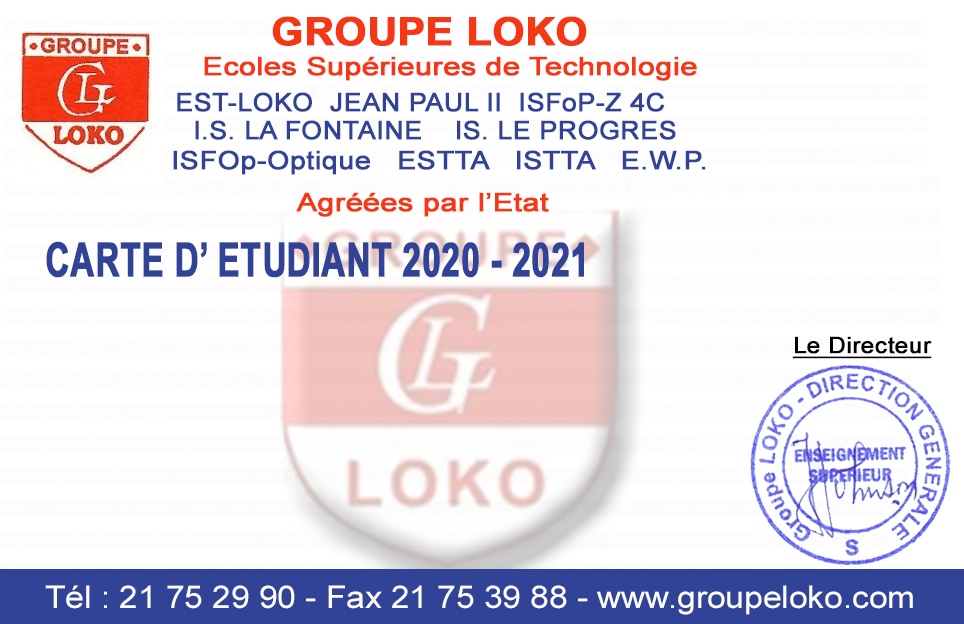
<style>
.page{position:relative;width:964px;height:624px;background:#ffffff}
.page>*{position:absolute;margin:0}
.t1{font:39px "Arial-BoldMT";color:#f53715;font-weight:bold;scale:1.04 1}
.t2{font:25.4px "ArialMT";color:#f53715;font-weight:bold;scale:1.18 1}
.t3{font:25.4px "ArialMT";color:#314396;font-weight:bold;scale:1.04 1}
.t4{font:25.4px "ArialMT";color:#314396;font-weight:bold;scale:1.11 1}
.t5{font:47px "Arial-BoldMT";color:#314396;font-weight:bold;scale:0.71 1}
.t6{font:22.8px "ArialMT";color:#000103;font-weight:bold;text-decoration:underline;scale:1.05 1}
.t7{font:31.5px "ArialMT";color:#fdfdff;scale:1.06 1}
</style>
<div class="page">
<p class="t1" style="left:272px;top:16px;width:315px;height:30px">GROUPE LOKO</p>
<p class="t2" style="left:204px;top:56px;width:493px;height:25px">Ecoles Supérieures de Technologie</p>
<p class="t3" style="left:177px;top:92px;width:488px;height:20px">EST-LOKO  JEAN PAUL II  ISFoP-Z 4C</p>
<p class="t3" style="left:195px;top:120px;width:481px;height:20px">I.S. LA FONTAINE    IS. LE PROGRES</p>
<p class="t4" style="left:173px;top:150px;width:533px;height:25px">ISFOp-Optique   ESTTA   ISTTA   E.W.P.</p>
<p class="t2" style="left:296px;top:192px;width:253px;height:25px">Agréées par l’Etat</p>
<p class="t5" style="left:46px;top:241px;width:538px;height:37px">CARTE D’ ETUDIANT 2020 - 2021</p>
<p class="t6" style="left:792px;top:336px;width:140px;height:23px">Le Directeur</p>
<p class="t7" style="left:45px;top:585px;width:868px;height:30px">Tél : 21 75 29 90 - Fax 21 75 39 88 - www.groupeloko.com</p>
</div>
